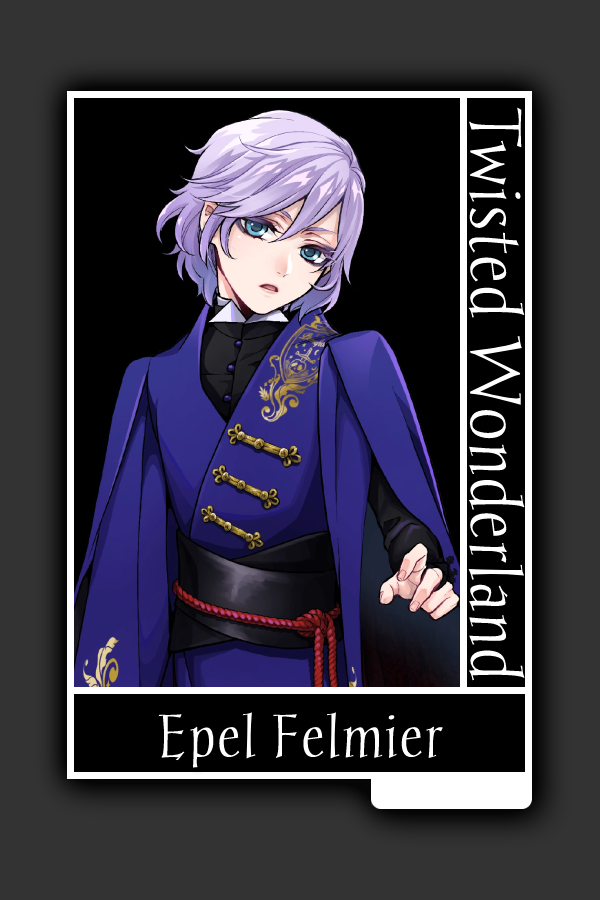
<style>
.page{position:relative;width:600px;height:900px;background:#000000}
.page>*{position:absolute;margin:0}
.t1{font:60px "Chantelli-Antiqua";color:#ffffff}
.t2{font:50px "Chantelli-Antiqua";color:#ffffff}
</style>
<div class="page">
<p class="t1" style="left:468px;top:107px;width:57px;height:574px;rotate:90deg">Twisted Wonderland</p>
<p class="t2" style="left:158px;top:712px;width:285px;height:56px">Epel Felmier</p>
</div>
